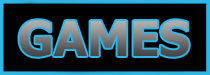
<style>
.page{position:relative;width:210px;height:75px;background:#000000}
.page>*{position:absolute;margin:0}
.t1{font:48px "Tahoma-Bold"}
</style>
<div class="page">
<p class="t1" style="left:19px;top:20px;width:170px;height:37px">GAMES</p>
</div>
